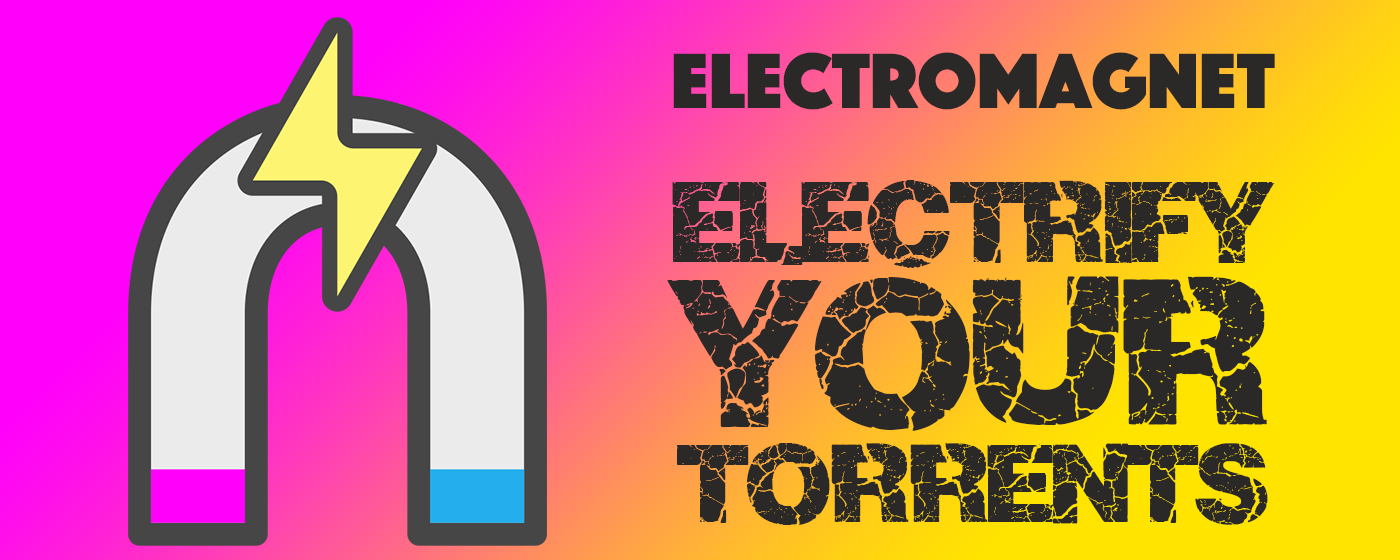
<style>
.page{position:relative;width:1400px;height:560px}
.page>*{position:absolute;margin:0}
.t1{font:81.3px "Phosphate-Solid";color:#2b2828}
.t2{font:98.1px "Crackvetica";color:#2b2828}
.t3{font:178.3px/163.5px "Crackvetica";color:#2b2828}
.t4{font:95.1px/96.6px "Crackvetica";color:#2b2828}
</style>
<div class="page">
<p class="t1" style="left:673px;top:52px;width:602px;height:58px">Electromagnet</p>
<p class="t2" style="left:667px;top:180px;width:608px;height:345px;text-align:center">ELECTRIFY<br><span class="t3">YOUR<br></span><span class="t4">TORRENTS</span></p>
</div>
